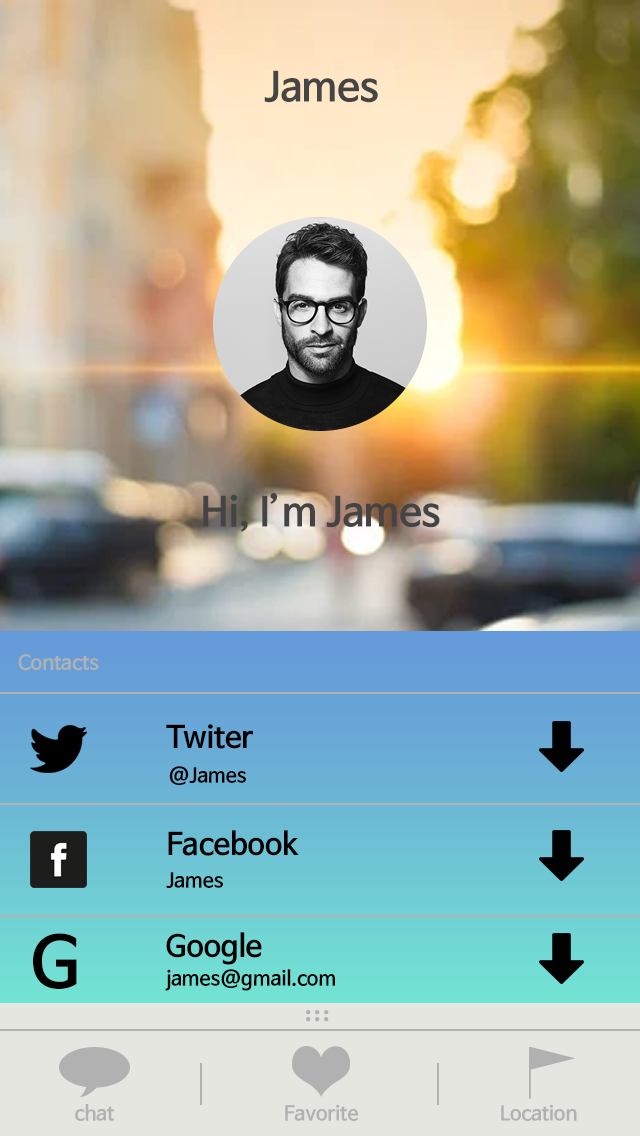
<style>
.page{position:relative;width:640px;height:1136px}
.page>*{position:absolute;margin:0}
.t1{font:40px "NanumBarunGothicBold";color:#454545}
.t2{font:40px "NanumBarunGothicBold";color:#454444}
.t3{font:20px "NanumBarunGothicBold";color:#b1b1b1}
.t4{font:30px "NanumBarunGothicBold";color:#000000}
.t5{font:20px "NanumBarunGothicBold";color:#000000}
.t6{font:70px "NanumBarunGothicBold";color:#000000}
</style>
<div class="page">
<p class="t1" style="left:264px;top:70px;width:114px;height:33px">James</p>
<p class="t2" style="left:203px;top:493px;width:237px;height:39px">Hi, I’m James</p>
<p class="t3" style="left:18px;top:654px;width:81px;height:17px">Contacts</p>
<p class="t4" style="left:166px;top:724px;width:87px;height:25px">Twiter</p>
<p class="t5" style="left:169px;top:766px;width:77px;height:19px">@James</p>
<p class="t4" style="left:168px;top:830px;width:131px;height:26px">Facebook</p>
<p class="t5" style="left:166px;top:872px;width:57px;height:16px">James</p>
<p class="t6" style="left:33px;top:933px;width:44px;height:56px">G</p>
<p class="t4" style="left:166px;top:932px;width:96px;height:33px">Google</p>
<p class="t5" style="left:165px;top:969px;width:170px;height:22px">james@gmail.com</p>
<p class="t3" style="left:75px;top:1104px;width:39px;height:17px">chat</p>
<p class="t3" style="left:285px;top:1104px;width:73px;height:17px">Favorite</p>
<p class="t3" style="left:501px;top:1104px;width:76px;height:17px">Location</p>
</div>
